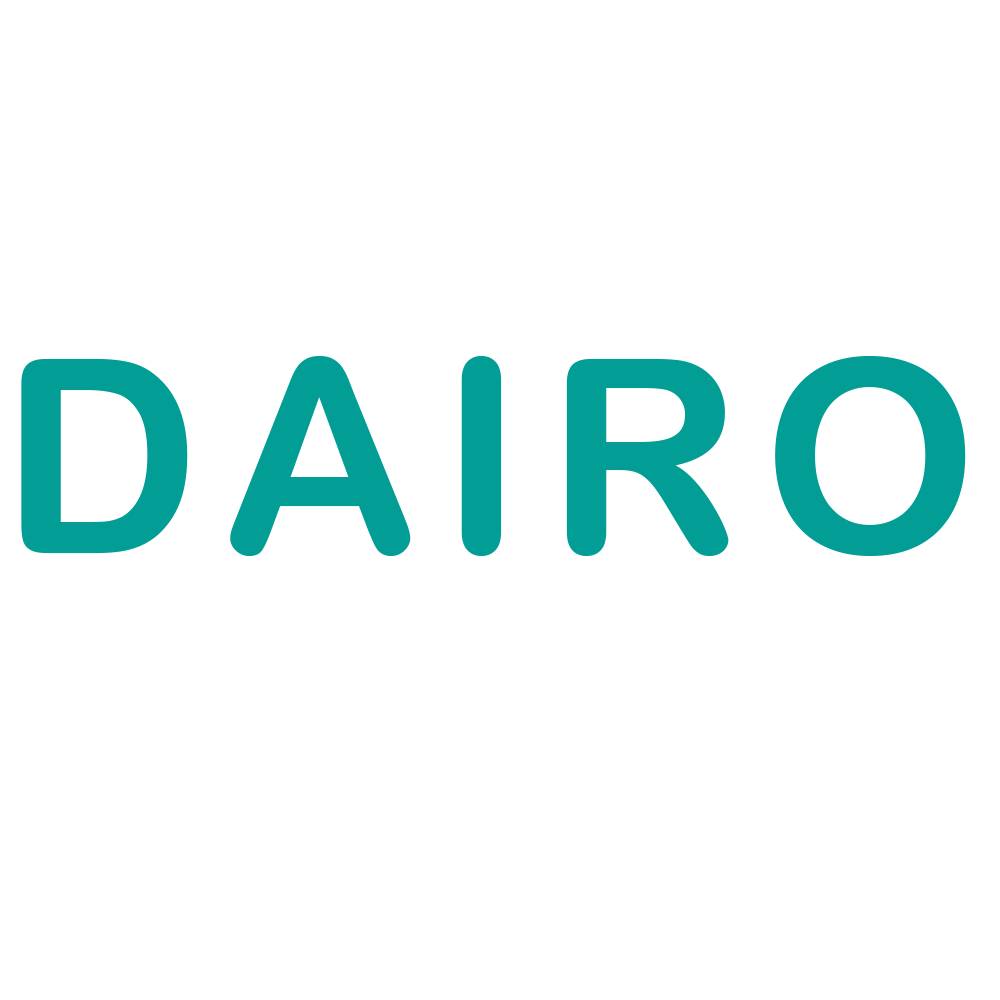
<style>
.page{position:relative;width:1000px;height:1000px;background:#ffffff}
.page>*{position:absolute;margin:0}
.t1{font:271.3px "ArialRoundedMTBold";letter-spacing:0.08em;color:#029d94}
</style>
<div class="page">
<p class="t1" style="left:21px;top:356px;width:945px;height:200px">DAIRO</p>
</div>
